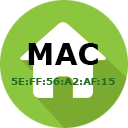
<style>
.page{position:relative;width:128px;height:128px;background:#ffffff}
.page>*{position:absolute;margin:0}
.t1{font:30px "Verdana-Bold";color:#010101}
.t2{font:10px "Verdana-Bold";color:#206e20}
.t3{font:10px "Verdana-Bold";letter-spacing:-0.04em;color:#206e20}
.t4{font:10px "Verdana-Bold";letter-spacing:0.02em;color:#206e20}
</style>
<div class="page">
<p class="t1" style="left:28px;top:43px;width:70px;height:22px">MAC</p>
<p class="t2" style="left:11px;top:78px;width:104px;height:7px">5E:FF:56:A2:<span class="t3">AF</span><span class="t4">:15</span></p>
</div>
